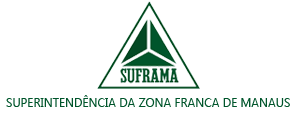
<style>
.page{position:relative;width:300px;height:114px;background:#ffffff}
.page>*{position:absolute;margin:0}
.t1{font:12px "LaoUI";color:#00552b}
</style>
<div class="page">
<p class="t1" style="left:6px;top:95px;width:284px;height:12px">SUPERINTENDÊNCIA DA ZONA FRANCA DE MANAUS</p>
</div>
